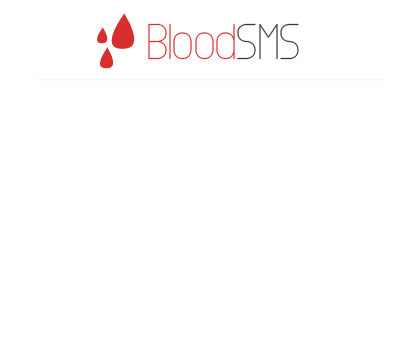
<style>
.page{position:relative;width:416px;height:352px;background:#ffffff}
.page>*{position:absolute;margin:0}
.t1{font:50px "Infinity";letter-spacing:-0.02em;color:#d72e2e}
.t2{font:50px "Infinity";letter-spacing:-0.02em;color:#d72e2e;text-transform:uppercase}
.t3{font:50px "Infinity";letter-spacing:-0.02em;color:#363636}
</style>
<div class="page">
<p class="t1" style="left:148px;top:23px;width:151px;height:37px"><span class="t2">b</span>lood<span class="t3">SMS</span></p>
</div>
